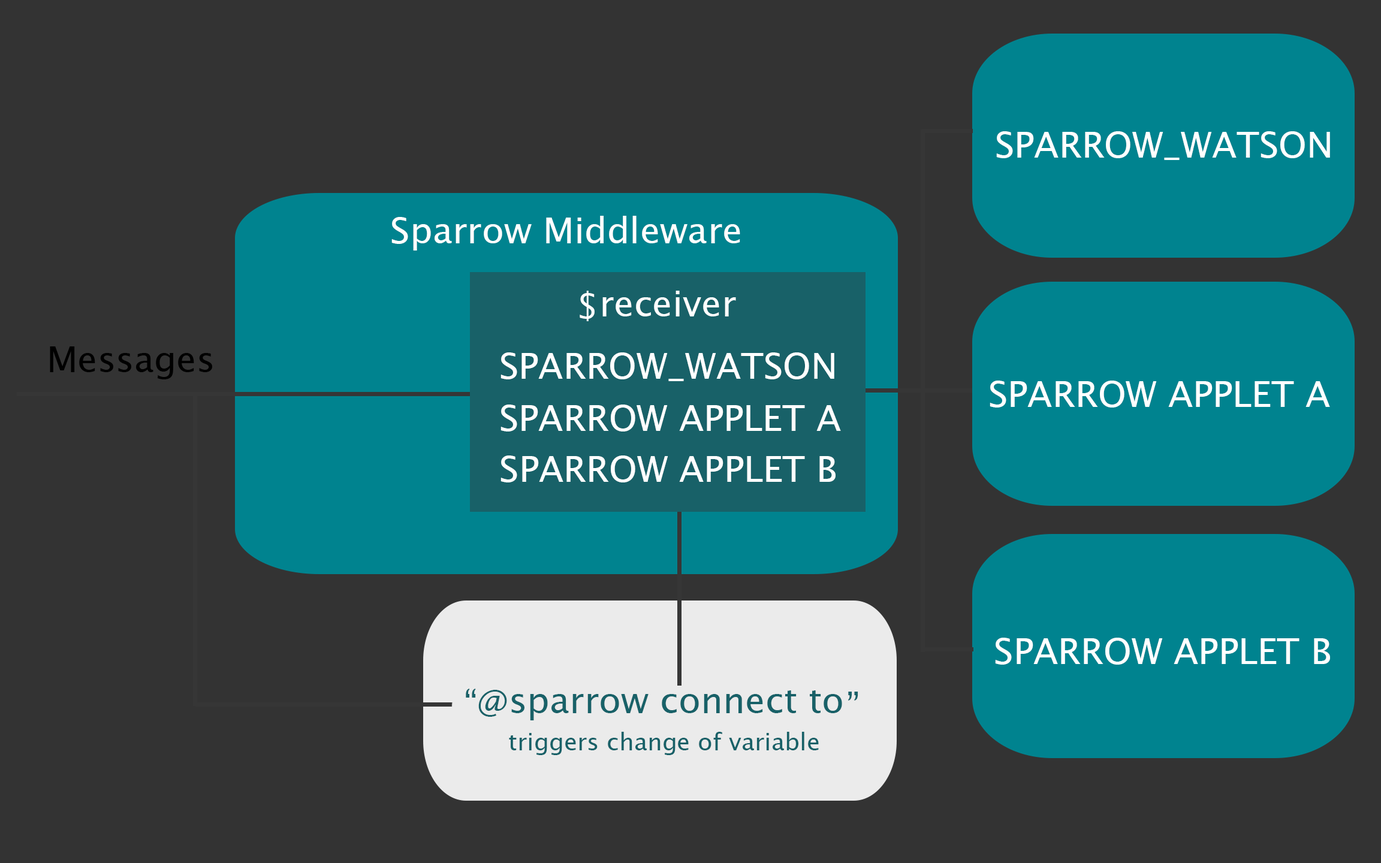
<style>
.page{position:relative;width:1381px;height:863px;background:#333333}
.page>*{position:absolute;margin:0}
.t1{font:36px "LucidaSansUnicode";color:#ffffff}
.t2{font:36px "LucidaSansUnicode";color:#000000}
.t3{font:36px "LucidaSansUnicode";color:#186168}
.t4{font:24px "LucidaSansUnicode";color:#186168}
</style>
<div class="page">
<p class="t1" style="left:996px;top:131px;width:334px;height:29px">SPARROW_WATSON</p>
<p class="t1" style="left:391px;top:216px;width:349px;height:35px">Sparrow Middleware</p>
<p class="t1" style="left:580px;top:291px;width:15px;height:30px">$</p>
<p class="t1" style="left:603px;top:291px;width:133px;height:26px">receiver</p>
<p class="t2" style="left:50px;top:347px;width:162px;height:32px">Messages</p>
<p class="t1" style="left:501px;top:353px;width:334px;height:28px">SPARROW_WATSON</p>
<p class="t1" style="left:990px;top:381px;width:340px;height:27px">SPARROW APPLET A</p>
<p class="t1" style="left:501px;top:405px;width:340px;height:27px">SPARROW APPLET A</p>
<p class="t1" style="left:501px;top:456px;width:335px;height:27px">SPARROW APPLET B</p>
<p class="t1" style="left:995px;top:638px;width:335px;height:27px">SPARROW APPLET B</p>
<p class="t3" style="left:466px;top:689px;width:41px;height:28px">@”</p>
<p class="t3" style="left:511px;top:691px;width:331px;height:30px">sparrow connect to</p>
<p class="t3" style="left:848px;top:692px;width:10px;height:9px">“</p>
<p class="t4" style="left:509px;top:732px;width:310px;height:23px">triggers change of variable</p>
</div>
